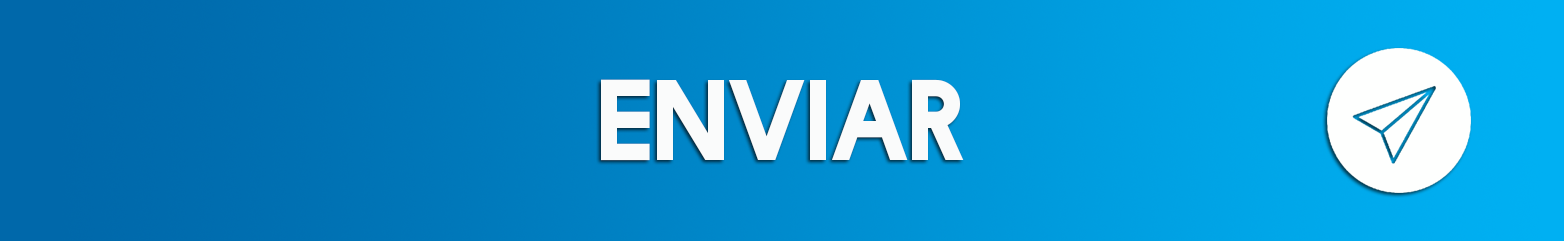
<style>
.page{position:relative;width:1564px;height:241px}
.page>*{position:absolute;margin:0}
.t1{font:106.2px "FacileSans";letter-spacing:0.001em;color:#fafbfb}
</style>
<div class="page">
<p class="t1" style="left:601px;top:79px;width:363px;height:82px">ENVIAR</p>
</div>
